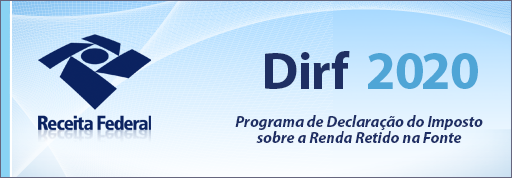
<style>
.page{position:relative;width:512px;height:178px}
.page>*{position:absolute;margin:0}
.t1{font:52.2px "MyriadPro-Bold";letter-spacing:-0.02em;color:#1f2f63}
.t2{font:53.7px "MyriadPro-Bold";letter-spacing:-0.02em;color:#4fa5d6}
.t3{font:15.8px/16px "MyriadPro-BoldIt";color:#1f2f65}
</style>
<div class="page">
<p class="t1" style="left:265px;top:51px;width:85px;height:38px">Dirf</p>
<p class="t2" style="left:368px;top:53px;width:110px;height:36px">2020</p>
<p class="t3" style="left:235px;top:115px;width:248px;height:28px;text-align:center">Programa de Declaração do Imposto<br>sobre a Renda Retido na Fonte</p>
</div>
